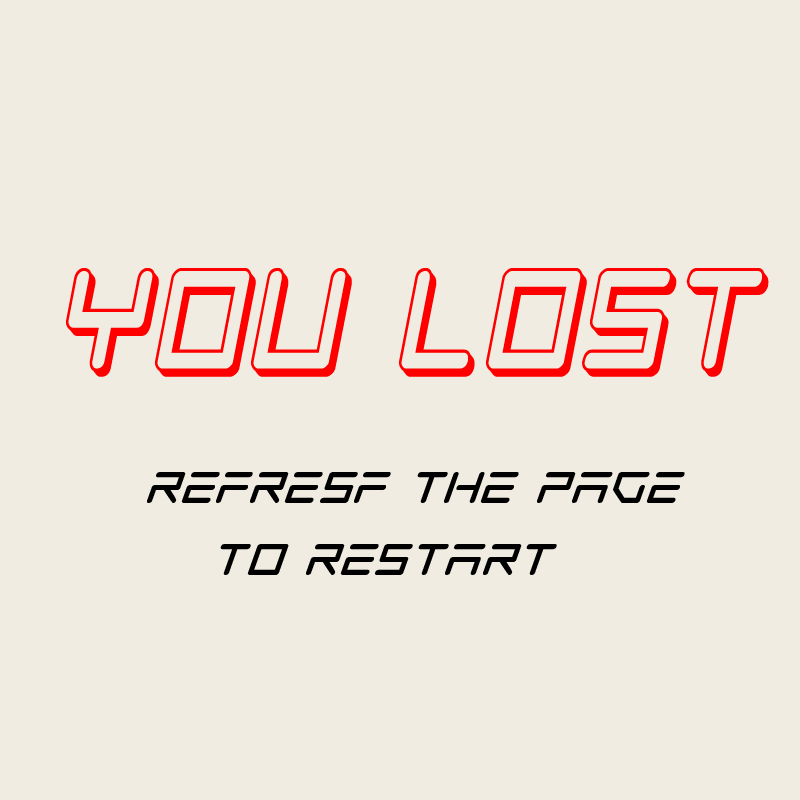
<style>
.page{position:relative;width:800px;height:800px;background:#f0ece1}
.page>*{position:absolute;margin:0}
.t1{font:190.8px "TempestApache3DItalic";color:#ff0000;scale:0.77 1}
.t2{font:60px "TempestApacheSuper-Italic";color:#000000}
</style>
<div class="page">
<p class="t1" style="left:66px;top:268px;width:703px;height:109px">you lost</p>
<p class="t2" style="left:147px;top:472px;width:538px;height:103px;text-align:center">refresf the page<br>   to restart</p>
</div>
